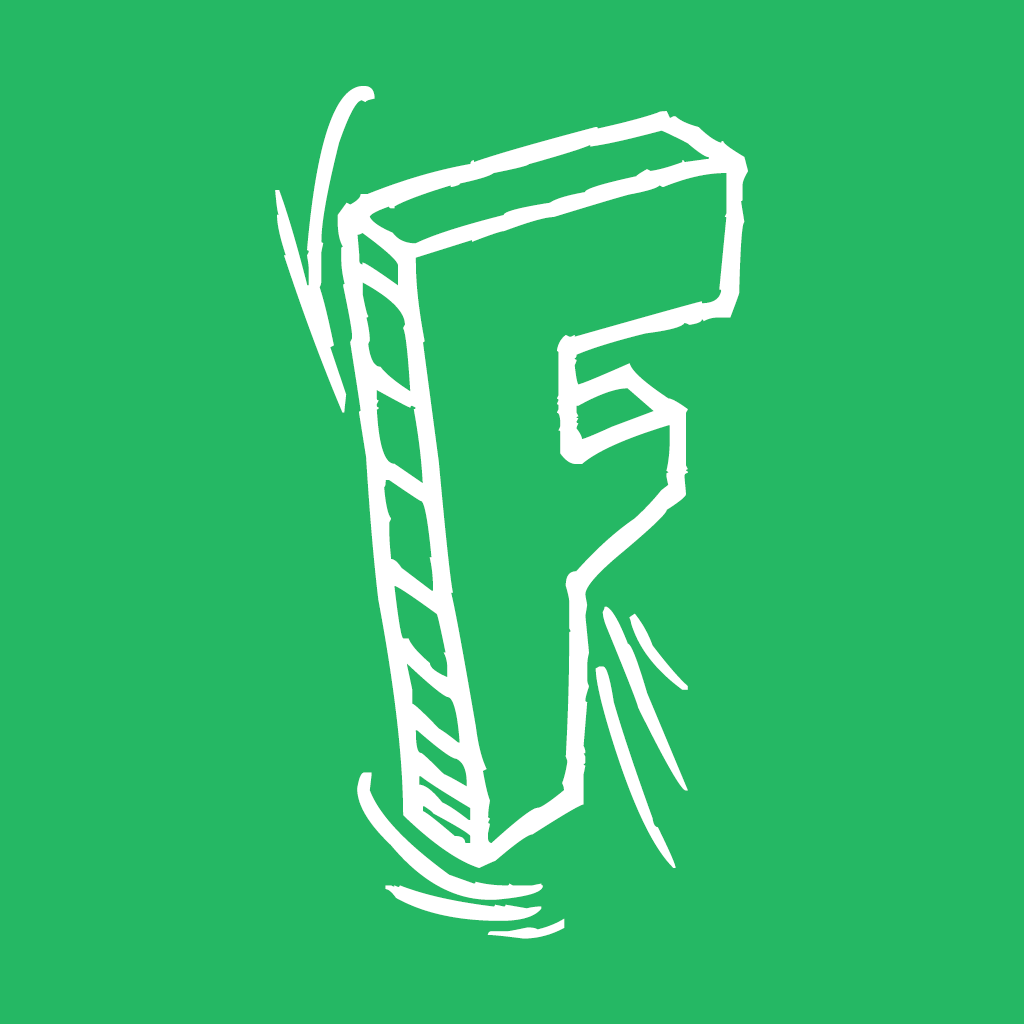
<style>
.page{position:relative;width:1024px;height:1024px;background:#25b864}
.page>*{position:absolute;margin:0}
.t1{font:464.5px/542px "GoodMorning";letter-spacing:-0.02em;color:#ffffff}
</style>
<div class="page">
<p class="t1" style="left:275px;top:86px;width:473px;height:853px;text-align:center">F</p>
</div>
